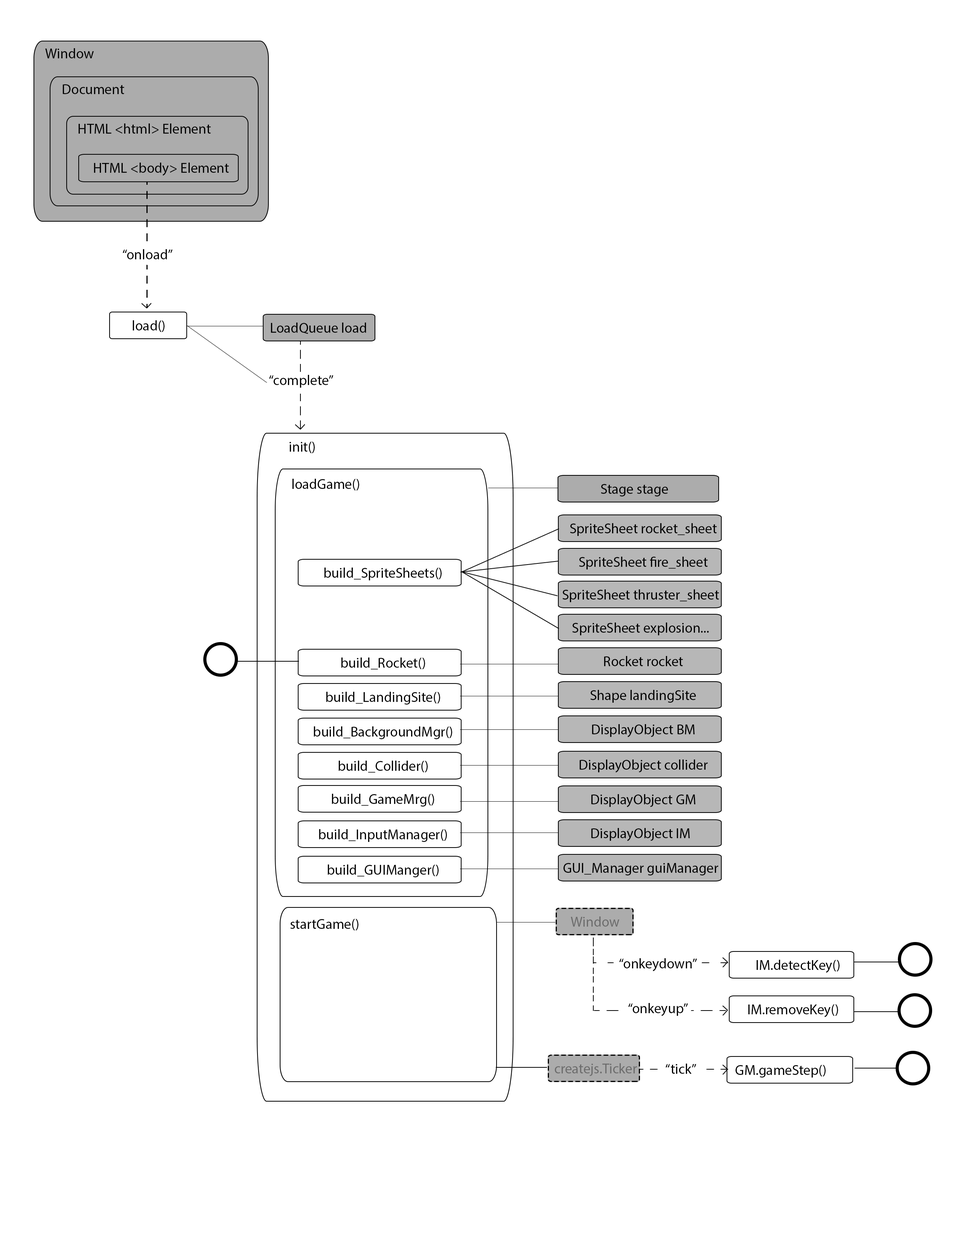
<style>
.page{position:relative;width:960px;height:1242px;background:#ffffff}
.page>*{position:absolute;margin:0}
.t1{font:14.1px "MyriadPro-Regular";color:#000000}
.t2{font:14.1px "MyriadPro-Regular";color:#6c6c6c}
</style>
<div class="page">
<p class="t1" style="left:45px;top:48px;width:49px;height:10px">Window</p>
<p class="t1" style="left:62px;top:84px;width:62px;height:10px">Document</p>
<p class="t1" style="left:78px;top:123px;width:133px;height:11px">HTML &lt;html&gt; Element</p>
<p class="t1" style="left:94px;top:163px;width:135px;height:13px">HTML &lt;body&gt; Element</p>
<p class="t1" style="left:123px;top:249px;width:50px;height:10px">“onload”</p>
<p class="t1" style="left:133px;top:320px;width:32px;height:12px">load()</p>
<p class="t1" style="left:271px;top:323px;width:95px;height:11px">LoadQueue load</p>
<p class="t1" style="left:269px;top:375px;width:65px;height:13px">“complete”</p>
<p class="t1" style="left:289px;top:442px;width:26px;height:11px">init()</p>
<p class="t1" style="left:292px;top:479px;width:67px;height:11px">loadGame()</p>
<p class="t1" style="left:601px;top:484px;width:67px;height:13px">Stage stage</p>
<p class="t1" style="left:570px;top:523px;width:147px;height:13px">SpriteSheet rocket_sheet</p>
<p class="t1" style="left:579px;top:557px;width:129px;height:13px">SpriteSheet fire_sheet</p>
<p class="t1" style="left:324px;top:568px;width:118px;height:12px">build_SpriteSheets()</p>
<p class="t1" style="left:562px;top:589px;width:157px;height:13px">SpriteSheet thruster_sheet</p>
<p class="t1" style="left:572px;top:623px;width:137px;height:12px">SpriteSheet explosion...</p>
<p class="t1" style="left:341px;top:658px;width:84px;height:12px">build_Rocket()</p>
<p class="t1" style="left:604px;top:656px;width:79px;height:10px">Rocket rocket</p>
<p class="t1" style="left:326px;top:692px;width:114px;height:13px">build_LandingSite()</p>
<p class="t1" style="left:590px;top:690px;width:106px;height:13px">Shape landingSite</p>
<p class="t1" style="left:592px;top:724px;width:103px;height:13px">DisplayObject BM</p>
<p class="t1" style="left:314px;top:727px;width:138px;height:12px">build_BackgroundMgr()</p>
<p class="t1" style="left:338px;top:761px;width:90px;height:12px">build_Collider()</p>
<p class="t1" style="left:579px;top:760px;width:129px;height:13px">DisplayObject collider</p>
<p class="t1" style="left:332px;top:794px;width:102px;height:13px">build_GameMrg()</p>
<p class="t1" style="left:591px;top:794px;width:104px;height:13px">DisplayObject GM</p>
<p class="t1" style="left:319px;top:829px;width:128px;height:13px">build_InputManager()</p>
<p class="t1" style="left:591px;top:828px;width:99px;height:13px">DisplayObject IM</p>
<p class="t1" style="left:327px;top:865px;width:112px;height:12px">build_GUIManger()</p>
<p class="t1" style="left:563px;top:863px;width:155px;height:13px">GUI_Manager guiManager</p>
<p class="t2" style="left:571px;top:917px;width:48px;height:10px">Window</p>
<p class="t1" style="left:290px;top:919px;width:68px;height:12px">startGame()</p>
<p class="t1" style="left:619px;top:958px;width:78px;height:14px">“onkeydown”</p>
<p class="t1" style="left:756px;top:960px;width:83px;height:13px">IM.detectKey()</p>
<p class="t1" style="left:628px;top:1003px;width:60px;height:13px">“onkeyup”</p>
<p class="t1" style="left:748px;top:1004px;width:90px;height:14px">IM.removeKey()</p>
<p class="t2" style="left:554px;top:1063px;width:83px;height:13px">createjs.Ticker</p>
<p class="t1" style="left:666px;top:1064px;width:30px;height:10px">“tick”</p>
<p class="t1" style="left:735px;top:1065px;width:91px;height:13px">GM.gameStep()</p>
</div>
